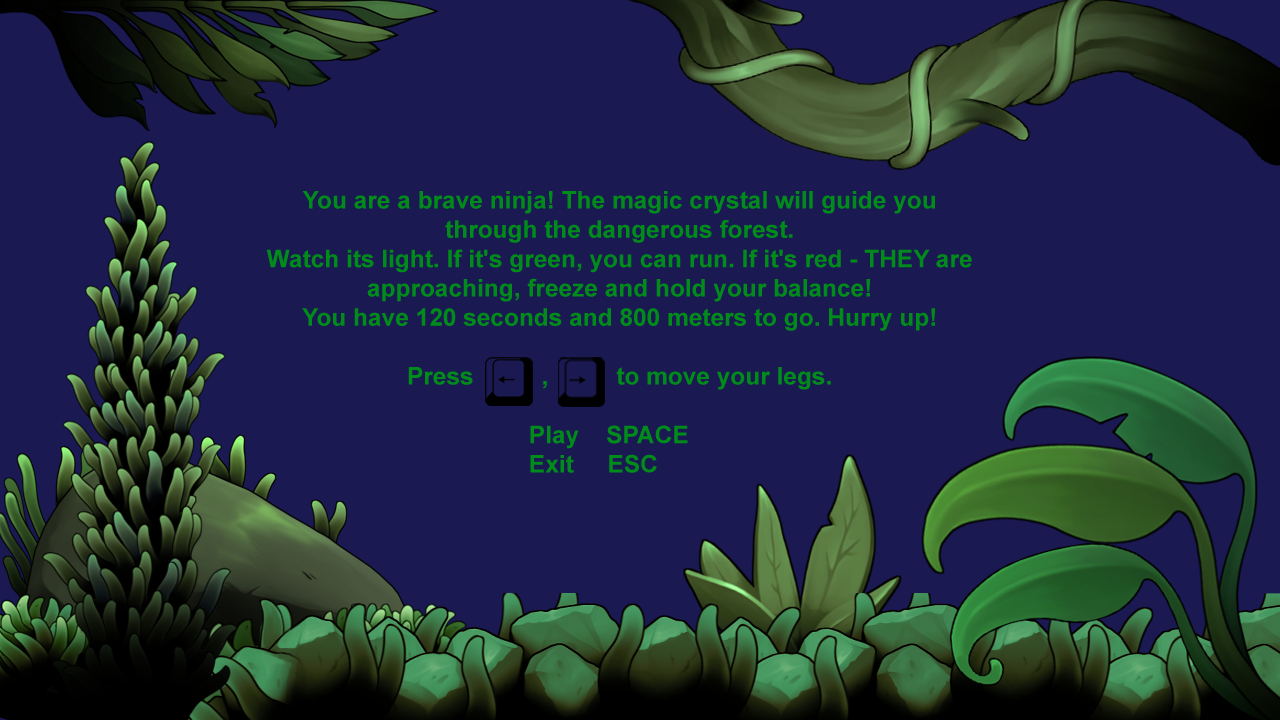
<style>
.page{position:relative;width:1280px;height:720px;background:#1a1952}
.page>*{position:absolute;margin:0}
.t1{font:24.4px "Arial-BoldMT";color:#008b1a}
</style>
<div class="page">
<p class="t1" style="left:266px;top:191px;width:706px;height:282px;text-align:center">You are a brave ninja! The magic crystal will guide you through the dangerous forest.<br>Watch its light. If it's green, you can run. If it's red - THEY are approaching, freeze and hold your balance!<br>You have 120 seconds and 800 meters to go. Hurry up!<br><br>Press          ,          to move your legs.<br><br>                                       Play    SPACE<br>                                       Exit     ESC</p>
</div>
